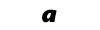
<style>
.page{position:relative;width:100px;height:30px;background:#ffffff}
.page>*{position:absolute;margin:0}
.t1{font:24px "SegoeUIBlack-Italic";color:#000000}
</style>
<div class="page">
<p class="t1" style="left:42px;top:9px;width:15px;height:14px">a</p>
</div>
